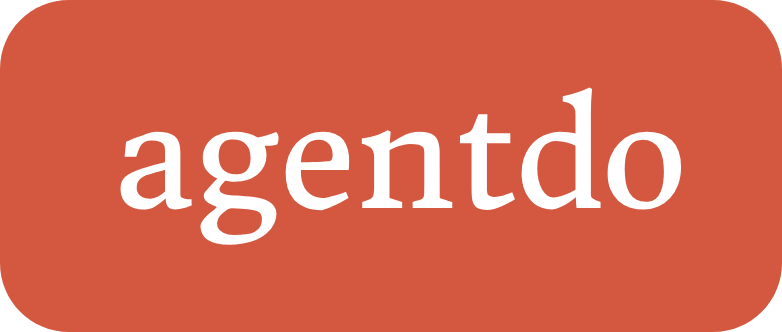
<style>
.page{position:relative;width:782px;height:332px;background:#d45840}
.page>*{position:absolute;margin:0}
.t1{font:150px "DonegalOne-Regular";color:#ffffff}
</style>
<div class="page">
<p class="t1" style="left:120px;top:87px;width:562px;height:158px">agentdo</p>
</div>
